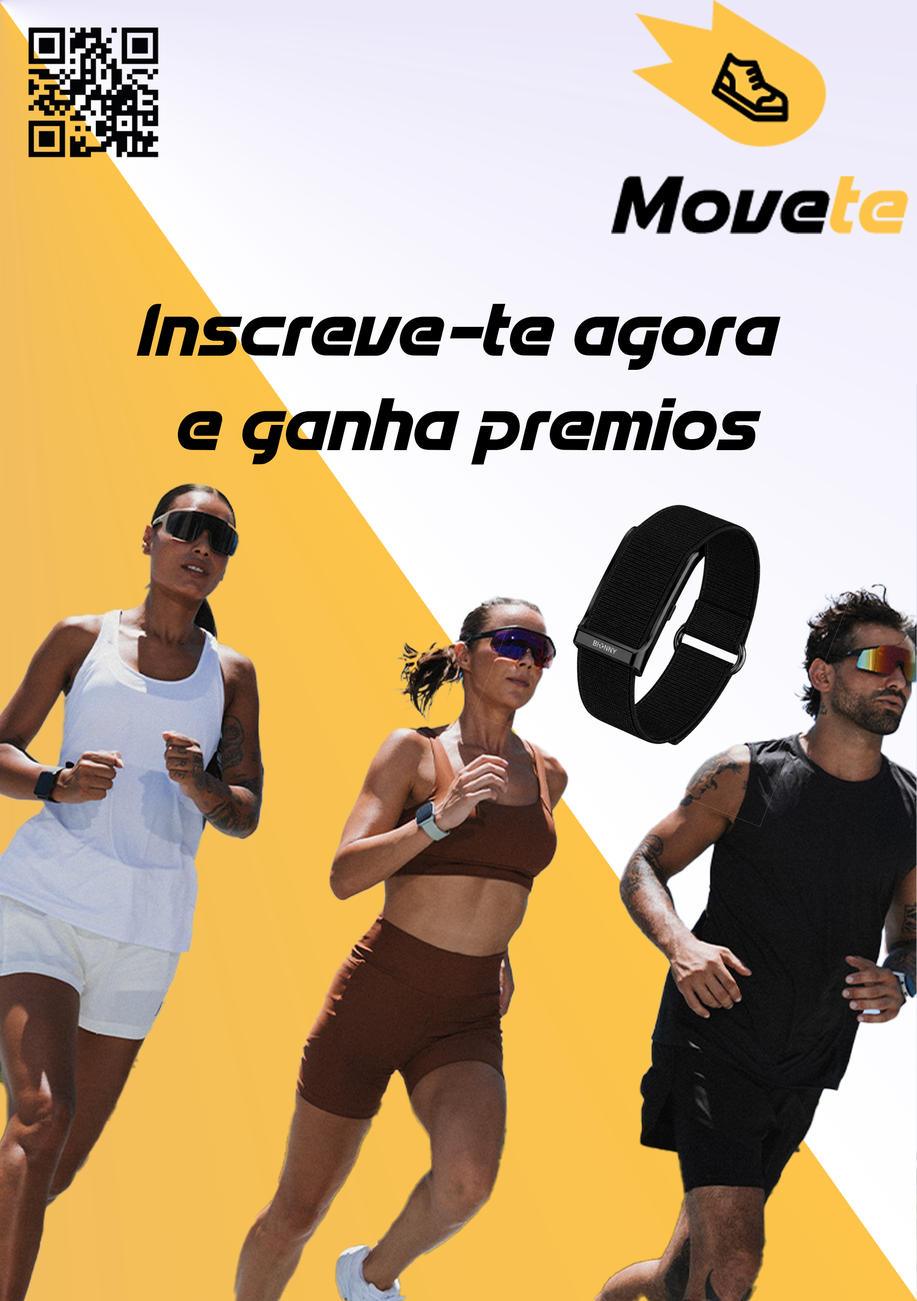
<style>
.page{position:relative;width:917px;height:1301px}
.page>*{position:absolute;margin:0}
.t1{font:78.7px "Spantaran";color:#000000}
</style>
<div class="page">
<p class="t1" style="left:136px;top:304px;width:644px;height:161px;text-align:center">Inscreve-te agora<br> e ganha premios</p>
</div>
